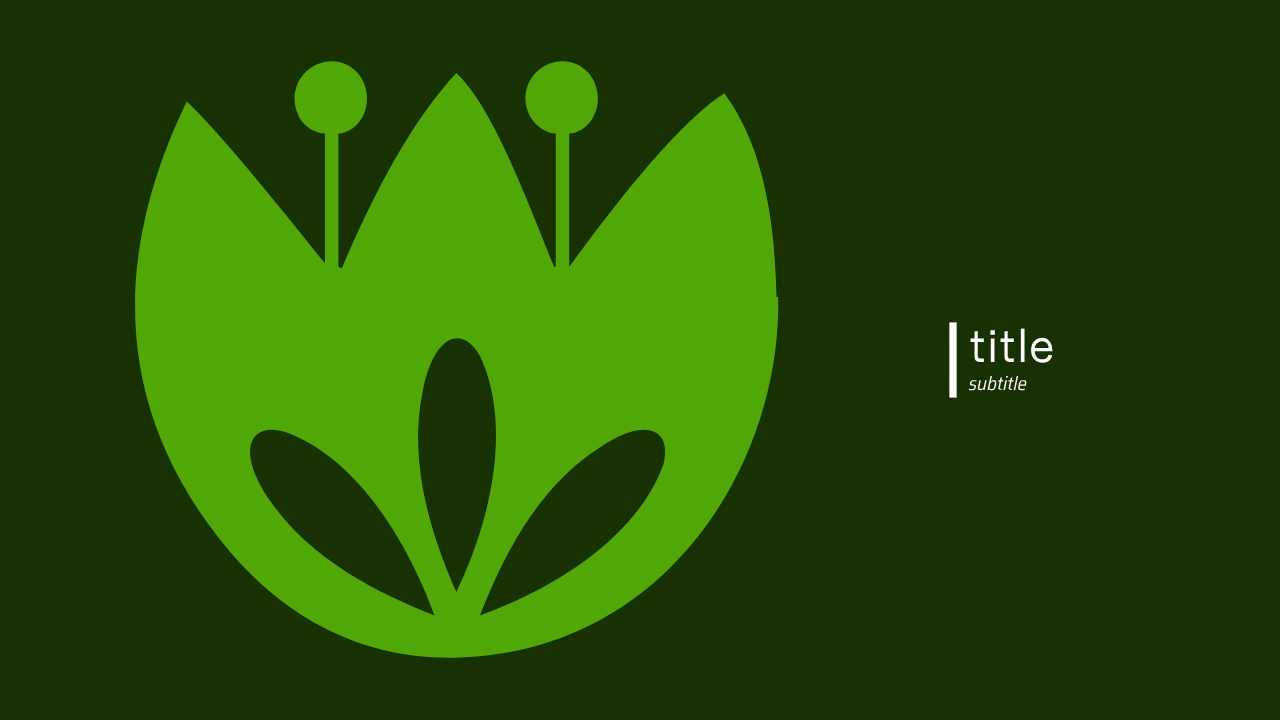
<style>
.page{position:relative;width:1280px;height:720px;background:#183102}
.page>*{position:absolute;margin:0}
.t1{font:47px "Uncut-Sans-Regular";color:#ffffff}
.t2{font:19px "SairaSemiCondensed-Italic";color:#ffffff}
</style>
<div class="page">
<p class="t1" style="left:970px;top:328px;width:83px;height:35px">title</p>
<p class="t2" style="left:968px;top:375px;width:59px;height:16px">subtitle</p>
</div>
